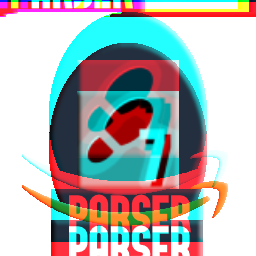
<style>
.page{position:relative;width:256px;height:256px;background:#ffffff}
.page>*{position:absolute;margin:0}
.t1{font:53px "FORQUE"}
</style>
<div class="page">
<p class="t1" style="left:68px;top:192px;width:123px;height:39px">PARSER</p>
</div>
